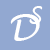
<style>
.page{position:relative;width:50px;height:50px;background:#92a8d1}
.page>*{position:absolute;margin:0}
.t1{font:24px "LucidaHandwriting-Italic";color:#ffffff}
.t2{font:34.7px "LucidaHandwriting-Italic";color:#ffffff}
</style>
<div class="page">
<p class="t1" style="left:29px;top:6px;width:14px;height:18px">S</p>
<p class="t2" style="left:10px;top:14px;width:30px;height:27px">D</p>
</div>
